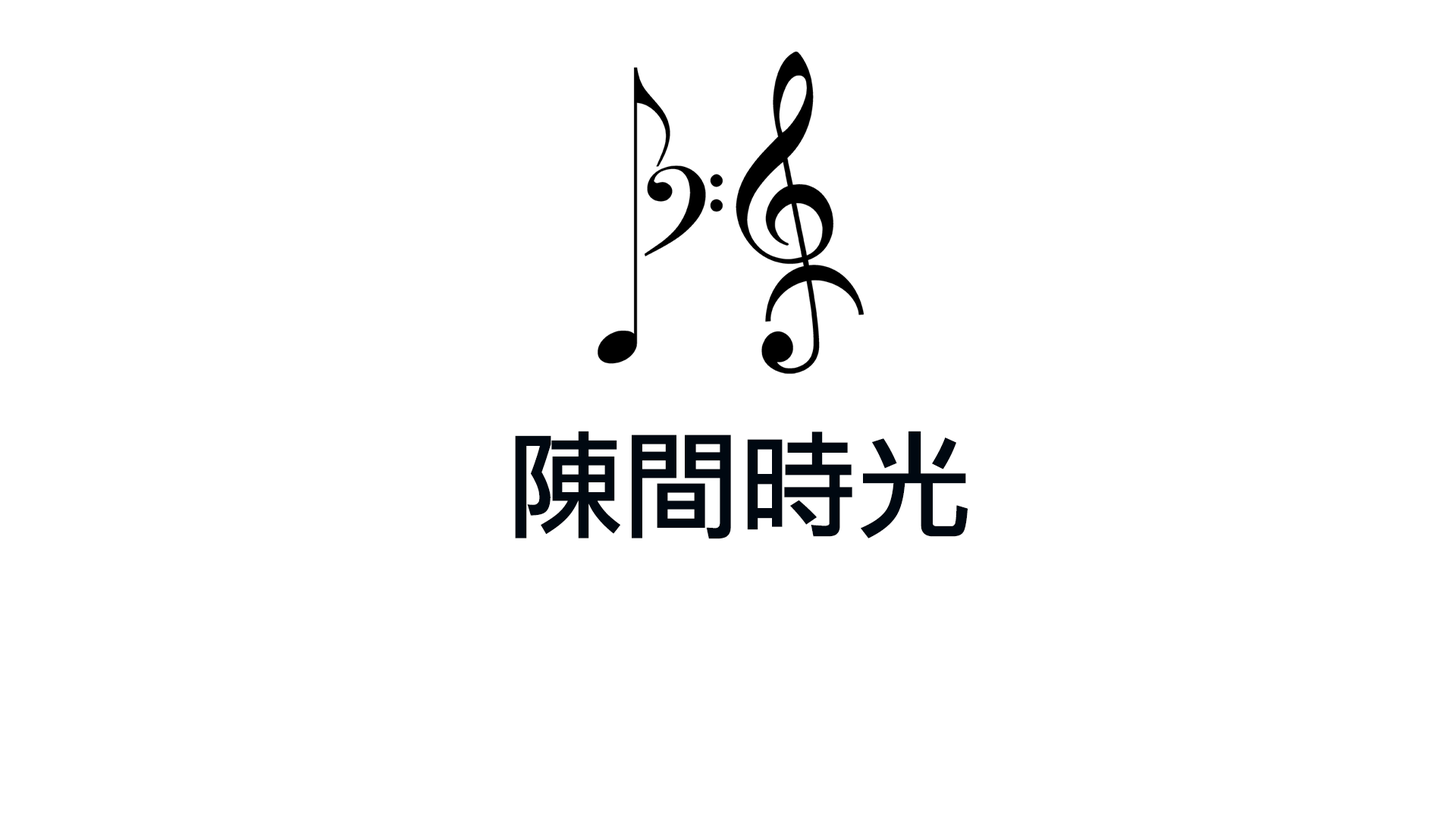
<style>
.page{position:relative;width:1456px;height:819px;background:#ffffff}
.page>*{position:absolute;margin:0}
.t1{font:116.3px "LiHeiPro";color:#000811}
</style>
<div class="page">
<p class="t1" style="left:515px;top:431px;width:453px;height:108px">陳間時光</p>
</div>
